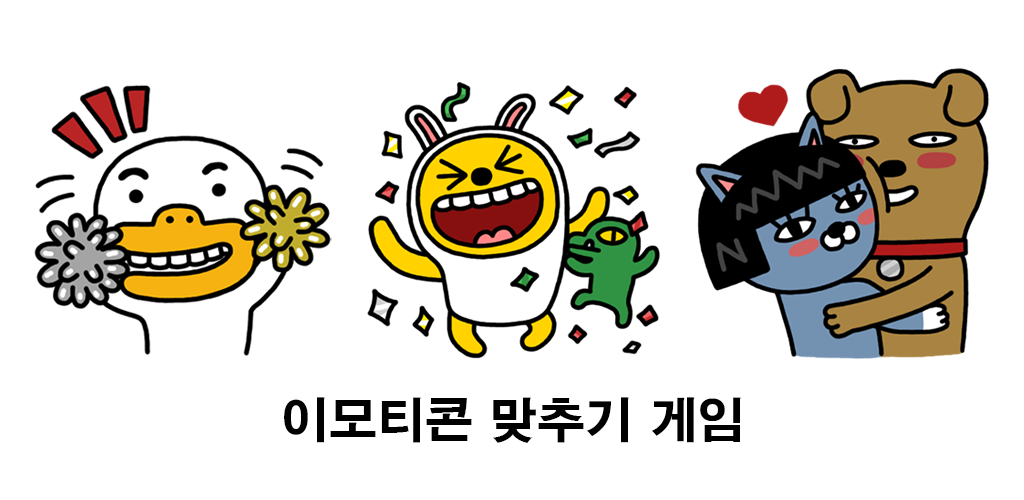
<style>
.page{position:relative;width:1024px;height:500px;background:#ffffff}
.page>*{position:absolute;margin:0}
.t1{font:48px "H2gtrE";color:#000000}
</style>
<div class="page">
<p class="t1" style="left:284px;top:397px;width:457px;height:46px">이모티콘 맞추기 게임</p>
</div>
